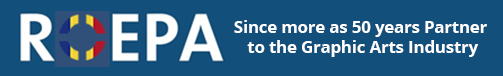
<style>
.page{position:relative;width:503px;height:76px;background:#124f7b}
.page>*{position:absolute;margin:0}
.t1{font:16.5px "OpenSans-Bold";color:#ffffff}
</style>
<div class="page">
<p class="t1" style="left:234px;top:20px;width:253px;height:37px;text-align:center">Since more as 50 years Partner <br>to the Graphic Arts Industry</p>
</div>
